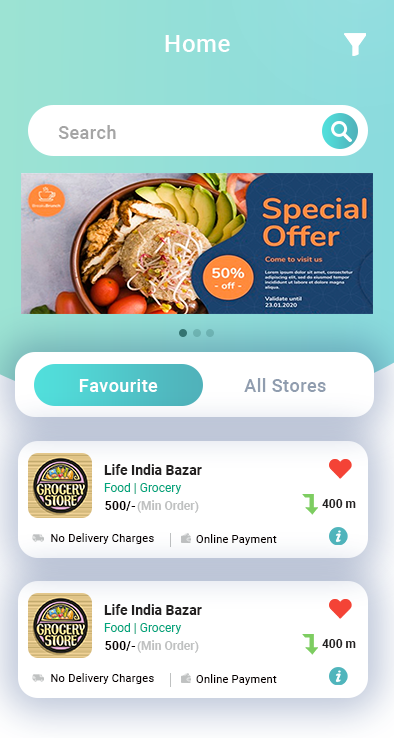
<style>
.page{position:relative;width:394px;height:738px;background:#ffffff}
.page>*{position:absolute;margin:0}
.t1{font:24px "Roboto-Medium";letter-spacing:0.025em;color:#ffffff}
.t2{font:18px "Roboto-Medium";letter-spacing:0.025em;color:#a5a5a5}
.t3{font:18px "Roboto-Medium";letter-spacing:0.025em;color:#ffffff}
.t4{font:18px "Roboto-Medium";letter-spacing:0.025em;color:#909daf}
.t5{font:14px "Roboto-Bold";color:#232121}
.t6{font:12px "Roboto-Regular";color:#00a57d}
.t7{font:12px "Roboto-Bold";letter-spacing:0.025em;color:#070000}
.t8{font:12px "Roboto-Bold";color:#bfc1c1}
.t9{font:12px "Roboto-Bold";color:#232121}
.t10{font:11px "Roboto-Regular";letter-spacing:0.025em;color:#070000}
</style>
<div class="page">
<p class="t1" style="left:165px;top:35px;width:65px;height:17px">Home</p>
<p class="t2" style="left:58px;top:125px;width:58px;height:14px">Search</p>
<p class="t3" style="left:79px;top:379px;width:79px;height:13px">Favourite</p>
<p class="t4" style="left:244px;top:378px;width:82px;height:14px">All Stores</p>
<p class="t5" style="left:104px;top:464px;width:98px;height:11px">Life India Bazar</p>
<p class="t6" style="left:104px;top:483px;width:78px;height:11px">Food | Grocery</p>
<p class="t7" style="left:105px;top:501px;width:31px;height:10px">500/-</p>
<p class="t8" style="left:137px;top:500px;width:62px;height:13px">(Min Order)</p>
<p class="t9" style="left:322px;top:499px;width:34px;height:9px">400 m</p>
<p class="t10" style="left:51px;top:533px;width:103px;height:11px">No Delivery Charges</p>
<p class="t10" style="left:196px;top:534px;width:81px;height:11px">Online Payment</p>
<p class="t5" style="left:104px;top:604px;width:98px;height:11px">Life India Bazar</p>
<p class="t6" style="left:104px;top:623px;width:78px;height:11px">Food | Grocery</p>
<p class="t7" style="left:105px;top:641px;width:31px;height:10px">500/-</p>
<p class="t8" style="left:137px;top:640px;width:62px;height:13px">(Min Order)</p>
<p class="t9" style="left:322px;top:639px;width:34px;height:9px">400 m</p>
<p class="t10" style="left:51px;top:673px;width:103px;height:11px">No Delivery Charges</p>
<p class="t10" style="left:196px;top:674px;width:81px;height:11px">Online Payment</p>
</div>
